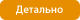
<style>
.page{position:relative;width:80px;height:20px;background:#e68d00}
.page>*{position:absolute;margin:0}
.t1{font:11px "MyriadPro-Semibold";color:#ffffff}
</style>
<div class="page">
<p class="t1" style="left:16px;top:5px;width:47px;height:10px">Дeтально</p>
</div>
